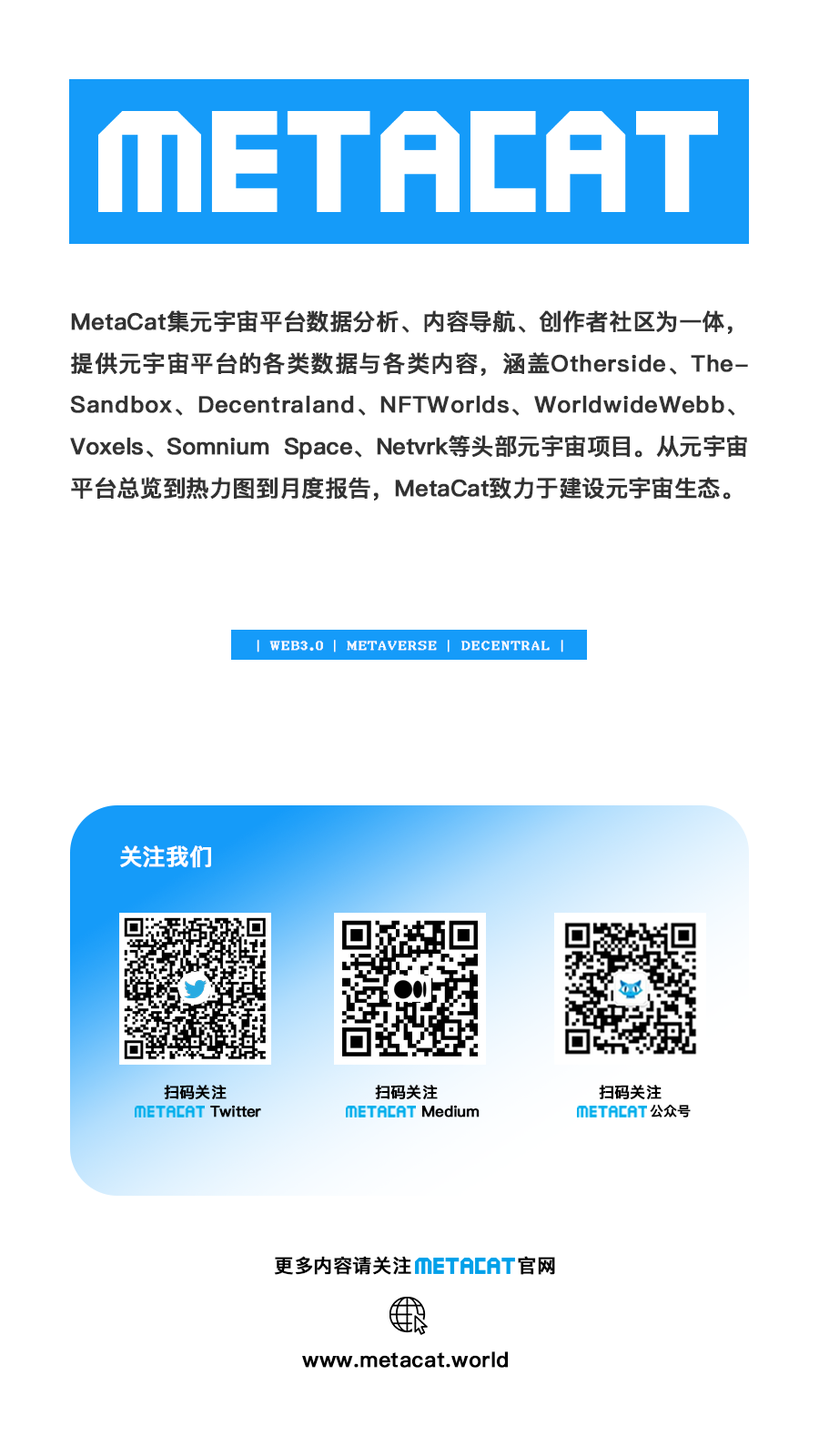
<style>
.page{position:relative;width:819px;height:1456px;background:#ffffff}
.page>*{position:absolute;margin:0}
.t1{font:22.7px/41.7px "PingFangSC-Medium";letter-spacing:-0.01em;color:#323232;font-weight:bold}
.t2{font:11.4px "IPix";letter-spacing:0.05em;color:#ffffff;font-weight:bold}
.t3{font:11.4px "MyriadPro-Regular";letter-spacing:0.05em;color:#ffffff;font-weight:bold}
.t4{font:22.7px "PingFangSC-Medium";letter-spacing:0.01em;color:#ffffff;font-weight:bold}
.t5{font:15.2px "PingFangSC-Medium";letter-spacing:0.01em;color:#000000;font-weight:bold}
.t6{font:15.2px "PingFangSC-Medium";letter-spacing:-0.025em;color:#000000;font-weight:bold}
.t7{font:13.4px "PingFangSC-Medium";letter-spacing:-0.025em;color:#000000;font-weight:bold}
.t8{font:19px "PingFangSC-Medium";letter-spacing:0.01em;color:#000000;font-weight:bold}
.t9{font:20.9px "PingFangSC-Medium";letter-spacing:0.01em;color:#000000;font-weight:bold}
</style>
<div class="page">
<p class="t1" style="left:70px;top:310px;width:678px;height:190px;text-align:justify">MetaCat集元宇宙平台数据分析、内容导航、创作者社区为一体，提供元宇宙平台的各类数据与各类内容，涵盖Otherside、TheSandbox、Decentraland、NFTWorlds、WorldwideWebb、Voxels、Somnium Space、Netvrk等头部元宇宙项目。从元宇宙平台总览到热力图到月度报告，MetaCat致力于建设元宇宙生态。</p>
<p class="t2" style="left:257px;top:640px;width:306px;height:12px"><span class="t3">|   </span>WEB3.0  <span class="t3">|   </span>METAVERSE  <span class="t3">|   </span>DECENTRAL  <span class="t3">|</span></p>
<p class="t4" style="left:120px;top:845px;width:91px;height:23px">关注我们</p>
<p class="t5" style="left:164px;top:1085px;width:63px;height:15px">扫码关注</p>
<p class="t5" style="left:375px;top:1085px;width:63px;height:15px">扫码关注</p>
<p class="t5" style="left:599px;top:1085px;width:63px;height:15px">扫码关注</p>
<p class="t6" style="left:210px;top:1105px;width:51px;height:12px">Twitter</p>
<p class="t6" style="left:422px;top:1105px;width:58px;height:12px">Medium</p>
<p class="t7" style="left:650px;top:1104px;width:41px;height:13px">公众号</p>
<p class="t8" style="left:274px;top:1256px;width:281px;height:19px">更多内容请关注               官网</p>
<p class="t9" style="left:302px;top:1351px;width:207px;height:17px">www.metacat.world</p>
</div>
